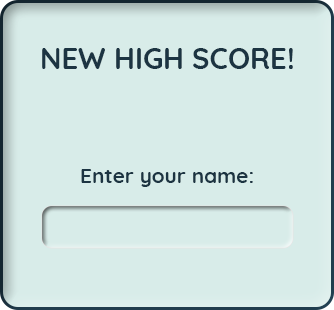
<style>
.page{position:relative;width:334px;height:310px;background:#d8ece9}
.page>*{position:absolute;margin:0}
.t1{font:29.2px "#9Slide03QuicksandBold-Bold";color:#1c3442;text-transform:uppercase}
.t2{font:29.2px "#9Slide03QuicksandBold-Bold";letter-spacing:0.1em;color:#1c3442;text-transform:uppercase}
.t3{font:20.8px "#9Slide03QuicksandBold-Bold";color:#1c3442}
</style>
<div class="page">
<p class="t1" style="left:42px;top:48px;width:251px;height:21px">new high score<span class="t2">!</span></p>
<p class="t3" style="left:81px;top:169px;width:172px;height:18px">Enter your name:</p>
</div>
